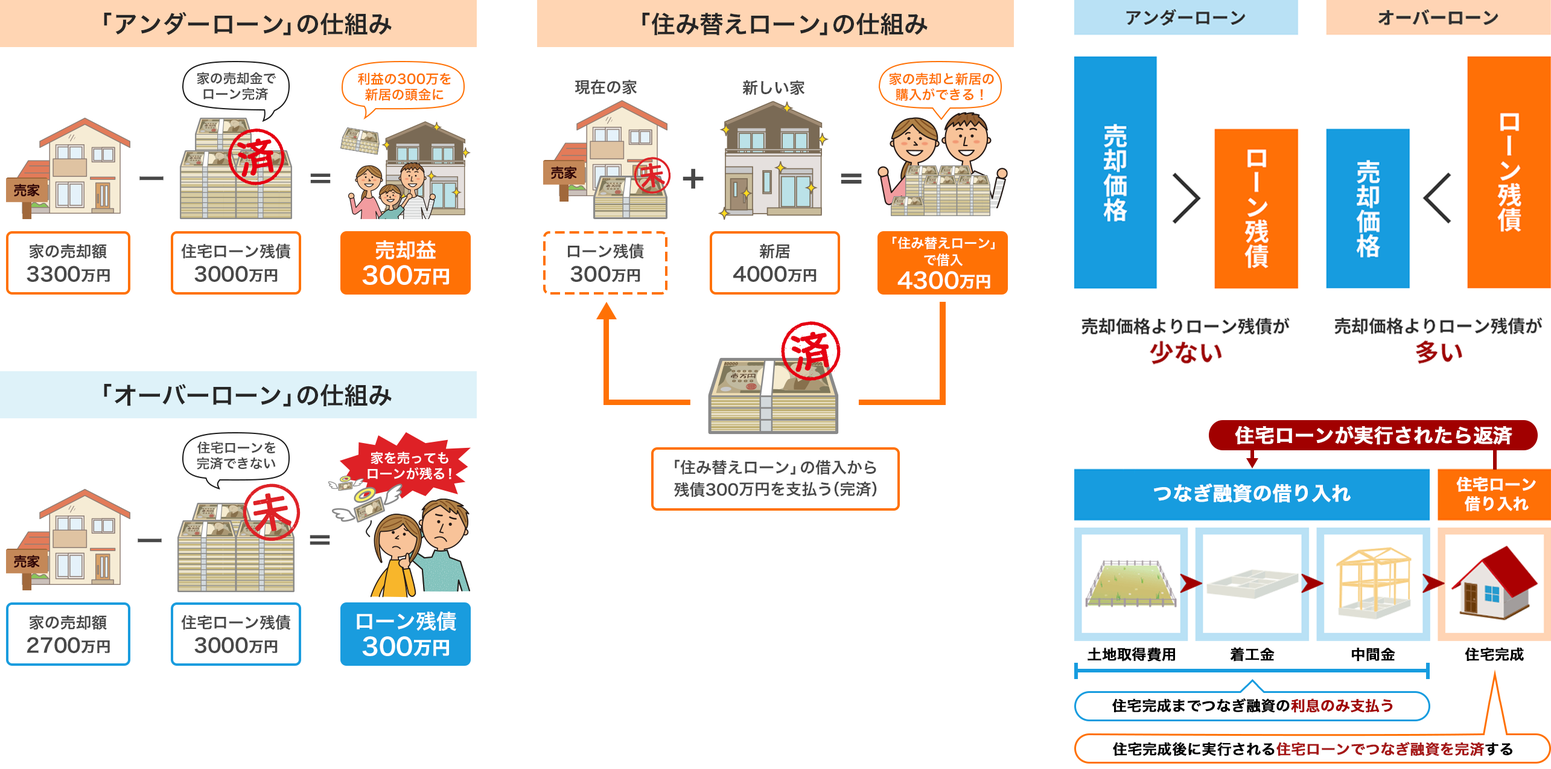
<style>
.page{position:relative;width:1551px;height:769px;background:#ffffff}
.page>*{position:absolute;margin:0}
.t1{font:24.1px "HiraKakuProN-W6";color:#262626}
.t2{font:13.3px "HiraKakuProN-W6";color:#484848}
.t3{font:13.3px "HiraKakuProN-W6";color:#ff7105}
.t4{font:15.7px "HiraKakuProN-W6";color:#484848}
.t5{font:27.8px "HiraKakuProN-W6";color:#484848}
.t6{font:27.8px "HiraKakuProN-W6";color:#484848;font-weight:bold}
.t7{font:20.5px "HiraKakuProN-W6";color:#ffffff}
.t8{font:13.3px "HiraKakuProN-W6";color:#ffffff}
.t9{font:19.3px "HiraKakuProN-W6";color:#484848}
.t10{font:14.5px "HiraKakuProN-W6";color:#484848;font-weight:bold}
.t11{font:24.1px "HiraKakuProN-W6";color:#ffffff}
.t12{font:18.1px "HiraKakuProN-W6";color:#ffffff;font-weight:bold}
.t13{font:21.7px "HiraKakuProN-W6";color:#ffffff}
.t14{font:15.7px "HiraKakuProN-W6";color:#ffffff;font-weight:bold}
.t15{font:19.3px "HiraKakuProN-W6";color:#ffffff;font-weight:bold}
.t16{font:13.3px "HiraKakuProN-W6";color:#fffefe}
.t17{font:15.7px/9.7px "HiraKakuProN-W6";color:#ffffff;font-weight:bold}
.t18{font:14.5px "HiraKakuProN-W6";color:#000000;font-weight:bold}
.t19{font:14.5px "HiraKakuProN-W6";color:#a10000;font-weight:bold}
.t20{font:14.5px "HiraKakuProN-W6";color:#a61717;font-weight:bold}
</style>
<div class="page">
<p class="t1" style="left:104px;top:12px;width:288px;height:24px">「アンダーローン」の仕組み</p>
<p class="t1" style="left:642px;top:13px;width:286px;height:23px">「住み替えローン」の仕組み</p>
<p class="t2" style="left:197px;top:72px;width:79px;height:12px">家の売却金で</p>
<p class="t3" style="left:358px;top:72px;width:93px;height:13px">利益の300万を</p>
<p class="t3" style="left:889px;top:72px;width:105px;height:13px">家の売却と新居の</p>
<p class="t2" style="left:203px;top:88px;width:66px;height:12px">ローン完済</p>
<p class="t3" style="left:365px;top:88px;width:79px;height:13px">新居の頭金に</p>
<p class="t4" style="left:575px;top:79px;width:62px;height:16px">現在の家</p>
<p class="t4" style="left:742px;top:80px;width:63px;height:15px">新しい家</p>
<p class="t3" style="left:896px;top:88px;width:87px;height:13px">購入ができる！</p>
<p class="t5" style="left:310px;top:173px;width:21px;height:10px">＝</p>
<p class="t6" style="left:683px;top:168px;width:21px;height:21px">＋</p>
<p class="t6" style="left:841px;top:173px;width:21px;height:11px">＝</p>
<p class="t5" style="left:139px;top:176px;width:25px;height:4px">ー</p>
<p class="t4" style="left:29px;top:244px;width:78px;height:15px">家の売却額</p>
<p class="t4" style="left:181px;top:243px;width:110px;height:16px">住宅ローン残債</p>
<p class="t7" style="left:375px;top:240px;width:61px;height:19px">売却益</p>
<p class="t4" style="left:568px;top:243px;width:76px;height:16px">ローン残債</p>
<p class="t4" style="left:759px;top:244px;width:31px;height:15px">新居</p>
<p class="t8" style="left:893px;top:237px;width:102px;height:12px">「住み替えローン」</p>
<p class="t8" style="left:924px;top:253px;width:39px;height:13px">で借入</p>
<p class="t9" style="left:27px;top:266px;width:83px;height:16px">3300<span class="t10">万円</span></p>
<p class="t9" style="left:194px;top:266px;width:84px;height:16px">3000<span class="t10">万円</span></p>
<p class="t11" style="left:362px;top:265px;width:87px;height:20px">300<span class="t12">万円</span></p>
<p class="t9" style="left:570px;top:266px;width:70px;height:16px">300<span class="t10">万円</span></p>
<p class="t9" style="left:733px;top:266px;width:84px;height:16px">4000<span class="t10">万円</span></p>
<p class="t13" style="left:897px;top:271px;width:93px;height:18px">4300<span class="t14">万円</span></p>
<p class="t1" style="left:104px;top:384px;width:288px;height:23px">「オーバーローン」の仕組み</p>
<p class="t15" style="left:1235px;top:425px;width:277px;height:20px">住宅ローンが実行されたら返済</p>
<p class="t2" style="left:197px;top:441px;width:79px;height:13px">住宅ローンを</p>
<p class="t2" style="left:197px;top:457px;width:79px;height:13px">完済できない</p>
<p class="t16" style="left:371px;top:451px;width:77px;height:13px">家を売っても</p>
<p class="t4" style="left:675px;top:459px;width:201px;height:16px">「住み替えローン」の借入から</p>
<p class="t16" style="left:368px;top:467px;width:83px;height:13px">ローンが残る！</p>
<p class="t4" style="left:674px;top:481px;width:203px;height:16px">残債300万円を支払う（完済）</p>
<p class="t15" style="left:1154px;top:483px;width:197px;height:20px">つなぎ融資の借り入れ</p>
<p class="t17" style="left:1456px;top:477px;width:80px;height:34px;text-align:center">住宅ローン<br><br>借り入れ</p>
<p class="t5" style="left:138px;top:538px;width:24px;height:5px">ー</p>
<p class="t5" style="left:310px;top:535px;width:20px;height:10px">＝</p>
<p class="t4" style="left:29px;top:615px;width:78px;height:15px">家の売却額</p>
<p class="t4" style="left:181px;top:614px;width:110px;height:16px">住宅ローン残債</p>
<p class="t7" style="left:357px;top:611px;width:99px;height:20px">ローン残債</p>
<p class="t9" style="left:27px;top:637px;width:83px;height:17px">2700<span class="t10">万円</span></p>
<p class="t9" style="left:194px;top:637px;width:84px;height:17px">3000<span class="t10">万円</span></p>
<p class="t11" style="left:362px;top:636px;width:87px;height:20px">300<span class="t12">万円</span></p>
<p class="t18" style="left:1087px;top:647px;width:88px;height:14px">土地取得費用</p>
<p class="t18" style="left:1230px;top:647px;width:45px;height:14px">着工金</p>
<p class="t18" style="left:1352px;top:648px;width:43px;height:13px">中間金</p>
<p class="t18" style="left:1465px;top:647px;width:59px;height:14px">住宅完成</p>
<p class="t18" style="left:1112px;top:698px;width:281px;height:15px">住宅完成までつなぎ融資の<span class="t19">利息のみ支払う</span></p>
<p class="t20" style="left:1113px;top:742px;width:399px;height:14px"><span class="t18">住宅完成後に実行される</span>住宅ローンでつなぎ融資を完済<span class="t18">する</span></p>
</div>
